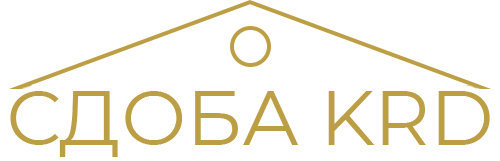
<style>
.page{position:relative;width:500px;height:161px;background:#ffffff}
.page>*{position:absolute;margin:0}
.t1{font:77.1px "Montserrat-Regular";color:#bc9e44;text-transform:uppercase}
</style>
<div class="page">
<p class="t1" style="left:10px;top:91px;width:480px;height:66px">СДОБА KRD</p>
</div>
